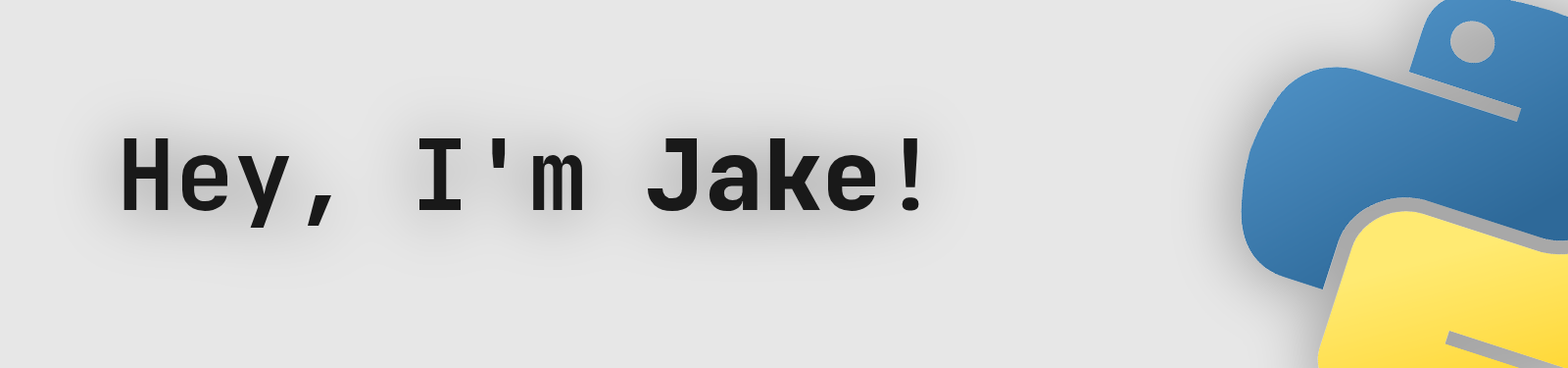
<style>
.page{position:relative;width:1568px;height:368px;background:#e7e7e7}
.page>*{position:absolute;margin:0}
.t1{font:98px "JetBrainsMono-Bold";color:#191919}
.t2{font:98px "JetBrainsMono-ExtraBold";color:#191919}
</style>
<div class="page">
<p class="t1" style="left:123px;top:138px;width:796px;height:89px">Hey, I'm <span class="t2">Jake</span>!</p>
</div>
